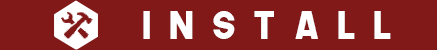
<style>
.page{position:relative;width:440px;height:50px;background:#811919}
.page>*{position:absolute;margin:0}
.t1{font:37.5px "TheNextFont";letter-spacing:0.48em;color:#ffffff}
</style>
<div class="page">
<p class="t1" style="left:143px;top:11px;width:248px;height:28px">INSTALL</p>
</div>
